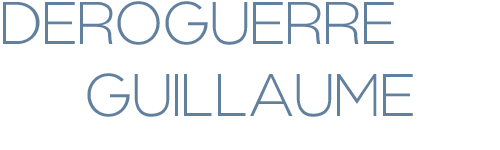
<style>
.page{position:relative;width:500px;height:150px;background:#ffffff}
.page>*{position:absolute;margin:0}
.t1{font:60px "RegencieLightAlt";color:#61809e}
</style>
<div class="page">
<p class="t1" style="left:3px;top:1px;width:410px;height:116px">DEROGUERRE<br>GUILLAUME</p>
</div>
